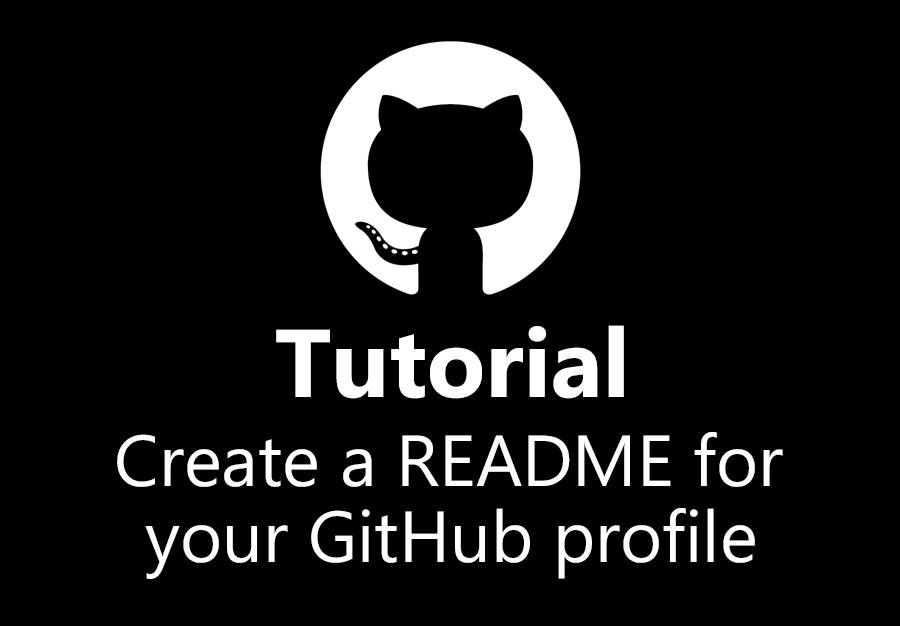
<style>
.page{position:relative;width:900px;height:626px;background:#000000}
.page>*{position:absolute;margin:0}
.t1{font:96px "MicrosoftPhagsPa-Bold";color:#ffffff}
.t2{font:72px "MicrosoftPhagsPa";color:#ffffff}
</style>
<div class="page">
<p class="t1" style="left:276px;top:325px;width:348px;height:74px">Tutorial</p>
<p class="t2" style="left:117px;top:432px;width:666px;height:55px">Create a README for</p>
<p class="t2" style="left:145px;top:508px;width:610px;height:71px">your GitHub profile</p>
</div>
